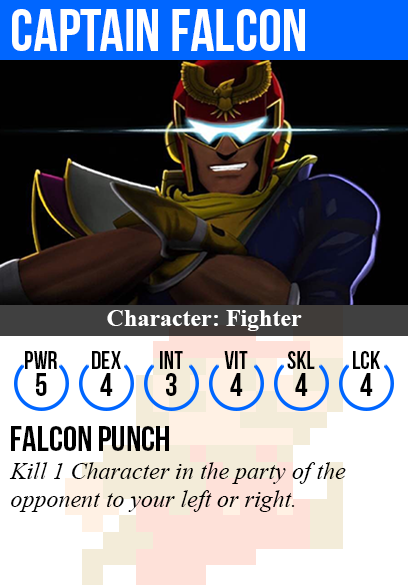
<style>
.page{position:relative;width:408px;height:585px;background:#ffffff}
.page>*{position:absolute;margin:0}
.t1{font:60px "BebasNeue";color:#ffffff}
.t2{font:24px "TimesNewRomanPS-BoldMT";color:#ffffff}
.t3{font:25px "BebasNeue";color:#000000}
.t4{font:32px "BebasNeue";color:#000000}
.t5{font:36px "BebasNeue";color:#000000}
.t6{font:24px "TimesNewRomanPS-ItalicMT";color:#000000}
</style>
<div class="page">
<p class="t1" style="left:12px;top:9px;width:293px;height:42px">captain falcon</p>
<p class="t2" style="left:107px;top:310px;width:195px;height:21px">Character: Fighter</p>
<p class="t3" style="left:25px;top:351px;width:32px;height:18px">PWR</p>
<p class="t3" style="left:92px;top:351px;width:29px;height:18px">dex</p>
<p class="t3" style="left:160px;top:351px;width:23px;height:18px">int</p>
<p class="t3" style="left:224px;top:351px;width:24px;height:18px">vit</p>
<p class="t3" style="left:287px;top:351px;width:28px;height:18px">skl</p>
<p class="t3" style="left:353px;top:351px;width:27px;height:18px">lck</p>
<p class="t4" style="left:36px;top:373px;width:11px;height:23px">5</p>
<p class="t4" style="left:100px;top:373px;width:13px;height:23px">4</p>
<p class="t4" style="left:166px;top:373px;width:11px;height:23px">3</p>
<p class="t4" style="left:230px;top:373px;width:13px;height:23px">4</p>
<p class="t4" style="left:295px;top:373px;width:13px;height:23px">4</p>
<p class="t4" style="left:360px;top:373px;width:13px;height:23px">4</p>
<p class="t5" style="left:11px;top:426px;width:158px;height:25px">falcon punch</p>
<p class="t6" style="left:9px;top:462px;width:337px;height:50px">Kill 1 Character in the party of the<br>opponent to your left or right.</p>
</div>
